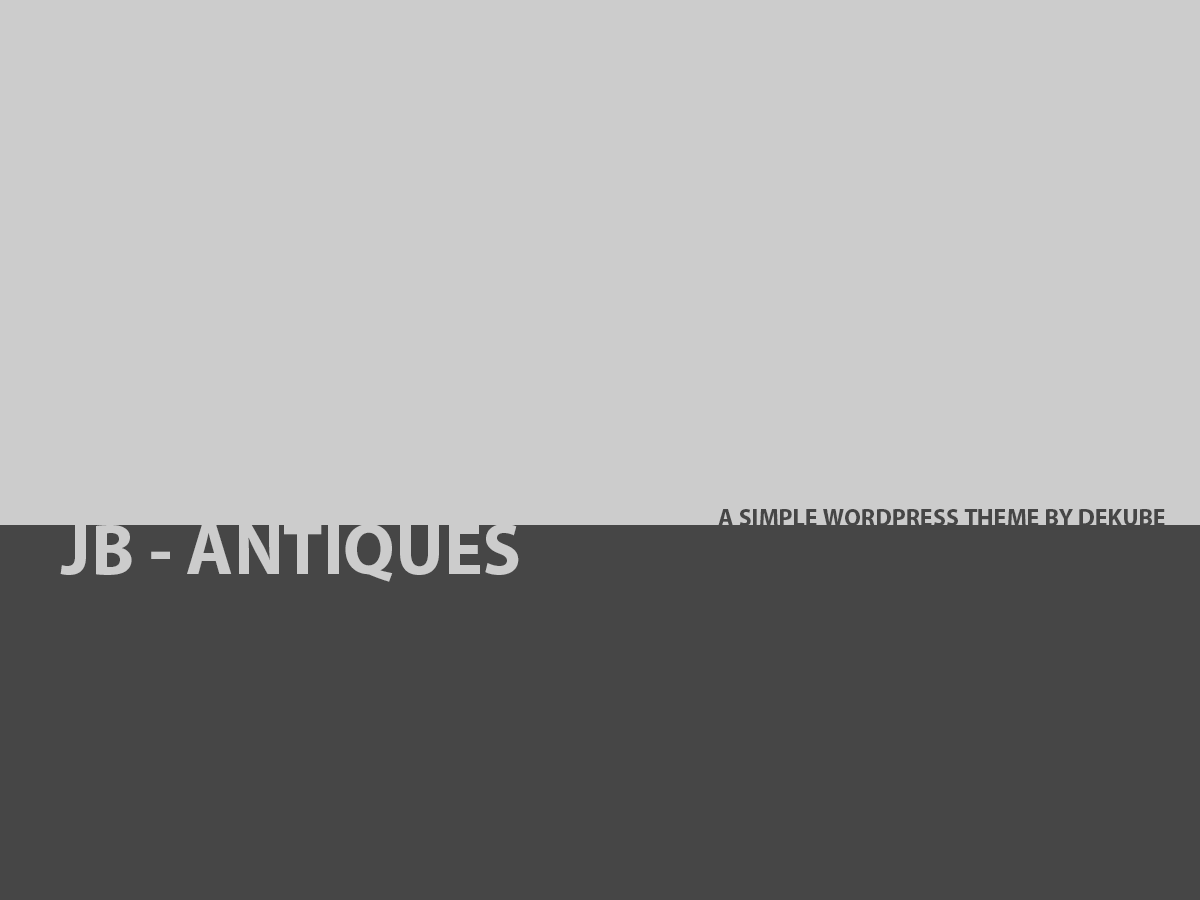
<style>
.page{position:relative;width:1200px;height:900px;background:#cccccc}
.page>*{position:absolute;margin:0}
.t1{font:24px "MyriadPro-Bold";color:#464646;text-transform:uppercase}
.t2{font:72px "MyriadPro-Bold";color:#cccccc}
</style>
<div class="page">
<p class="t1" style="left:718px;top:509px;width:447px;height:17px">A simple wordpress theme by Dekube</p>
<p class="t2" style="left:60px;top:524px;width:459px;height:58px">JB - ANTIQUES</p>
</div>
